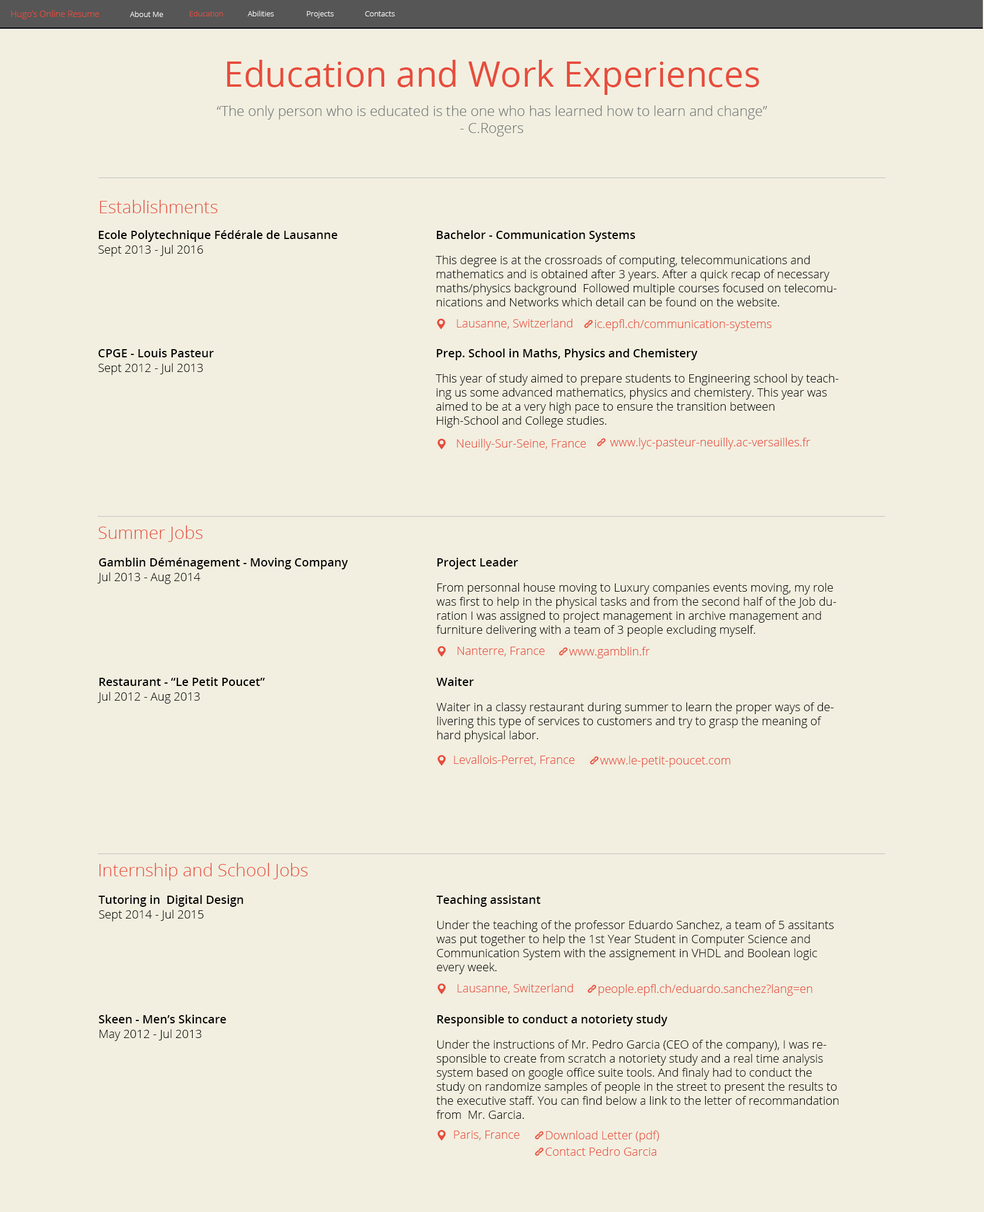
<style>
.page{position:relative;width:984px;height:1212px;background:#f2efe0}
.page>*{position:absolute;margin:0}
.t1{font:8.8px "OpenSans-Light";color:#e74c3c}
.t2{font:7.6px "OpenSans-Light";color:#ffffff}
.t3{font:7.6px "OpenSans-Light";color:#e74c3c}
.t4{font:35.1px "OpenSans";color:#e74c3c}
.t5{font:14.1px "OpenSans-Light";color:#727878}
.t6{font:17.6px "OpenSans-Light";color:#e74c3c}
.t7{font:11.7px "OpenSans-Semibold";color:#000000}
.t8{font:11.7px "OpenSans-Light";color:#000000}
.t9{font:11.7px "OpenSans-Light";color:#e74c3c}
</style>
<div class="page">
<p class="t1" style="left:11px;top:10px;width:88px;height:9px">Hugo’s Online Resume</p>
<p class="t2" style="left:130px;top:11px;width:33px;height:6px">About Me</p>
<p class="t3" style="left:190px;top:11px;width:33px;height:5px">Education</p>
<p class="t2" style="left:248px;top:11px;width:26px;height:5px">Abilities</p>
<p class="t2" style="left:307px;top:11px;width:27px;height:7px">Projects</p>
<p class="t2" style="left:365px;top:11px;width:30px;height:5px">Contacts</p>
<p class="t4" style="left:227px;top:60px;width:532px;height:35px">Education and Work Experiences</p>
<p class="t5" style="left:217px;top:105px;width:550px;height:31px;text-align:center">“The only person who is educated is the one who has learned how to learn and change”<br>- C.Rogers</p>
<p class="t6" style="left:100px;top:200px;width:118px;height:13px">Establishments</p>
<p class="t7" style="left:98px;top:230px;width:239px;height:12px">Ecole Polytechnique Fédérale de Lausanne</p>
<p class="t7" style="left:436px;top:230px;width:199px;height:12px">Bachelor - Communication Systems</p>
<p class="t8" style="left:98px;top:245px;width:105px;height:12px">Sept 2013 - Jul 2016</p>
<p class="t8" style="left:436px;top:255px;width:401px;height:51px">This degree is at the crossroads of computing, telecommunications and mathematics and is obtained after 3 years. After a quick recap of necessary maths/physics background  Followed multiple courses focused on telecomunications and Networks which detail can be found on the website.</p>
<p class="t9" style="left:457px;top:319px;width:115px;height:10px">Lausanne, Switzerland</p>
<p class="t9" style="left:595px;top:319px;width:176px;height:12px">ic.epfl.ch/communication-systems</p>
<p class="t7" style="left:98px;top:348px;width:116px;height:9px">CPGE - Louis Pasteur</p>
<p class="t7" style="left:436px;top:348px;width:262px;height:12px">Prep. School in Maths, Physics and Chemistery</p>
<p class="t8" style="left:98px;top:363px;width:105px;height:12px">Sept 2012 - Jul 2013</p>
<p class="t8" style="left:436px;top:374px;width:403px;height:54px">This year of study aimed to prepare students to Engineering school by teaching us some advanced mathematics, physics and chemistery. This year was aimed to be at a very high pace to ensure the transition between High-School and College studies.</p>
<p class="t9" style="left:610px;top:438px;width:201px;height:11px">www.lyc-pasteur-neuilly.ac-versailles.fr</p>
<p class="t9" style="left:457px;top:439px;width:129px;height:11px">Neuilly-Sur-Seine, France</p>
<p class="t6" style="left:98px;top:525px;width:105px;height:17px">Summer Jobs</p>
<p class="t7" style="left:99px;top:558px;width:249px;height:11px">Gamblin Déménagement - Moving Company</p>
<p class="t7" style="left:437px;top:558px;width:81px;height:11px">Project Leader</p>
<p class="t8" style="left:97px;top:572px;width:103px;height:12px">Jul 2013 - Aug 2014</p>
<p class="t8" style="left:436px;top:583px;width:400px;height:54px">From personnal house moving to Luxury companies events moving, my role was first to help in the physical tasks and from the second half of the Job duration I was assigned to project management in archive management and furniture delivering with a team of 3 people excluding myself.</p>
<p class="t9" style="left:457px;top:647px;width:88px;height:10px">Nanterre, France</p>
<p class="t9" style="left:569px;top:647px;width:81px;height:11px">www.gamblin.fr</p>
<p class="t7" style="left:99px;top:677px;width:166px;height:9px">Restaurant - “Le Petit Poucet”</p>
<p class="t7" style="left:436px;top:677px;width:38px;height:9px">Waiter</p>
<p class="t8" style="left:97px;top:692px;width:103px;height:11px">Jul 2012 - Aug 2013</p>
<p class="t8" style="left:436px;top:702px;width:398px;height:40px">Waiter in a classy restaurant during summer to learn the proper ways of delivering this type of services to customers and try to grasp the meaning of hard physical labor.</p>
<p class="t9" style="left:454px;top:755px;width:121px;height:11px">Levallois-Perret, France</p>
<p class="t9" style="left:600px;top:756px;width:130px;height:11px">www.le-petit-poucet.com</p>
<p class="t6" style="left:99px;top:863px;width:209px;height:17px">Internship and School Jobs</p>
<p class="t7" style="left:98px;top:895px;width:145px;height:12px">Tutoring in  Digital Design</p>
<p class="t7" style="left:436px;top:895px;width:105px;height:12px">Teaching assistant</p>
<p class="t8" style="left:99px;top:910px;width:105px;height:11px">Sept 2014 - Jul 2015</p>
<p class="t8" style="left:436px;top:920px;width:398px;height:54px">Under the teaching of the professor Eduardo Sanchez, a team of 5 assitants was put together to help the 1st Year Student in Computer Science and Communication System with the assignement in VHDL and Boolean logic every week.</p>
<p class="t9" style="left:457px;top:983px;width:116px;height:11px">Lausanne, Switzerland</p>
<p class="t9" style="left:599px;top:984px;width:213px;height:12px">people.epfl.ch/eduardo.sanchez?lang=en</p>
<p class="t7" style="left:99px;top:1014px;width:127px;height:9px">Skeen - Men’s Skincare</p>
<p class="t7" style="left:437px;top:1014px;width:231px;height:12px">Responsible to conduct a notoriety study</p>
<p class="t8" style="left:100px;top:1029px;width:101px;height:12px">May 2012 - Jul 2013</p>
<p class="t8" style="left:436px;top:1040px;width:403px;height:79px">Under the instructions of Mr. Pedro Garcia (CEO of the company), I was responsible to create from scratch a notoriety study and a real time analysis system based on google office suite tools. And finaly had to conduct the study on randomize samples of people in the street to present the results to the executive staff. You can find below a link to the letter of recommandation from  Mr. Garcia.</p>
<p class="t9" style="left:454px;top:1130px;width:66px;height:10px">Paris, France</p>
<p class="t9" style="left:546px;top:1130px;width:113px;height:12px">Download Letter (pdf)</p>
<p class="t9" style="left:545px;top:1147px;width:112px;height:9px">Contact Pedro Garcia</p>
</div>
